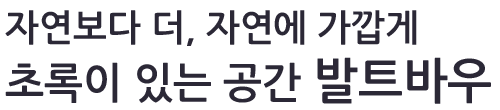
<style>
.page{position:relative;width:500px;height:110px;background:#ffffff}
.page>*{position:absolute;margin:0}
.t1{font:36.4px/57.4px "NanumGothicBold";color:#2b2836}
.t2{font:41.9px/57.4px "NanumGothicBold";color:#2b2836}
.t3{font:48.2px/57.4px "NanumGothicBold";color:#2b2836}
</style>
<div class="page">
<p class="t1" style="left:5px;top:10px;width:486px;height:94px">자연보다 더, 자연에 가깝게<br><span class="t2">초록이 있는 공간 </span><span class="t3">발트바우</span></p>
</div>
